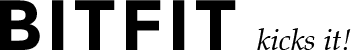
<style>
.page{position:relative;width:351px;height:50px;background:#ffffff}
.page>*{position:absolute;margin:0}
.t1{font:71px "Montserrat-Bold";letter-spacing:0.05em;color:#000000;text-transform:uppercase}
.t2{font:30px "PalatinoLinotype-Italic";color:#000000}
</style>
<div class="page">
<p class="t1" style="left:0px;top:0px;width:236px;height:50px">bitfit</p>
<p class="t2" style="left:257px;top:28px;width:94px;height:22px">kicks it!</p>
</div>
